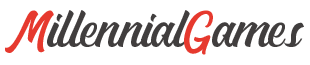
<style>
.page{position:relative;width:310px;height:65px;background:#ffffff}
.page>*{position:absolute;margin:0}
.t1{font:49.3px "MatanePersonalUseOnly-Script";color:#413e3e}
.t2{font:49.3px "MatanePersonalUseOnly-Script";color:#e6392e}
</style>
<div class="page">
<p class="t1" style="left:5px;top:10px;width:299px;height:45px"><span class="t2">M</span>illennial<span class="t2">G</span>ames</p>
</div>
